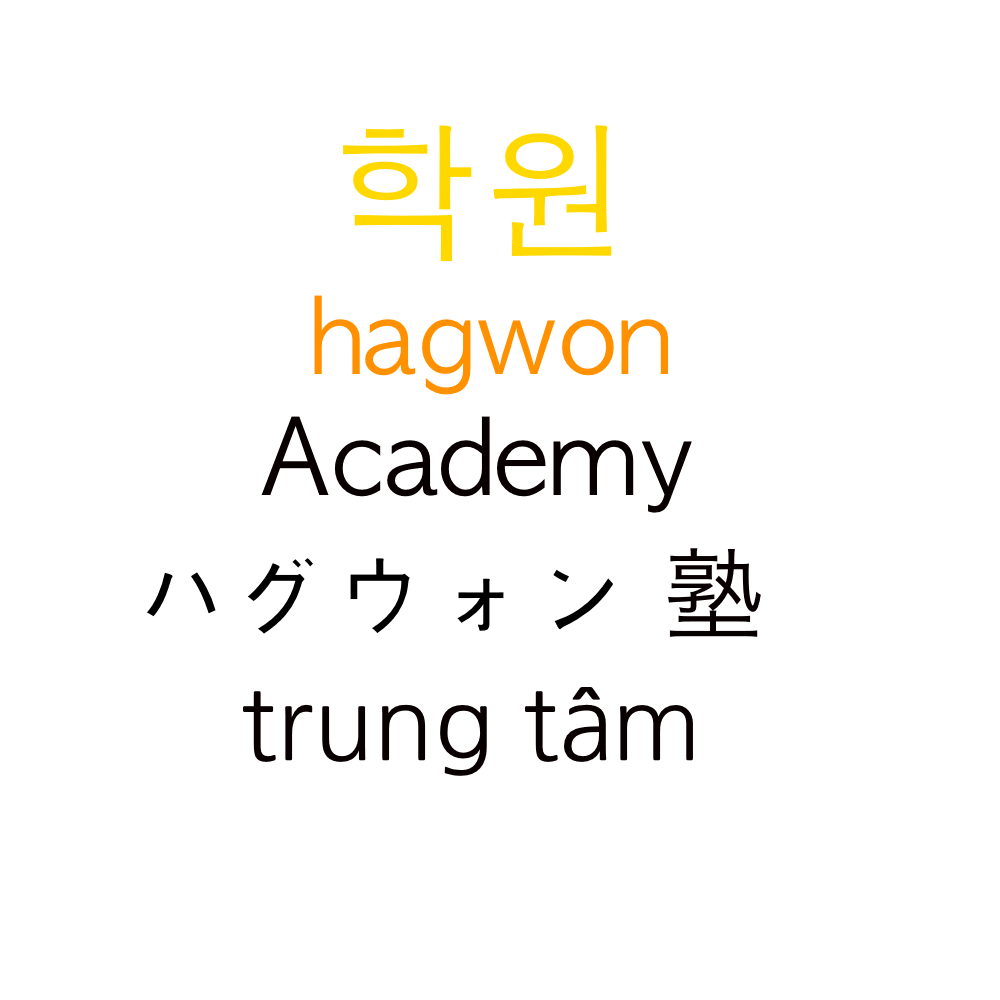
<style>
.page{position:relative;width:1000px;height:1000px;background:#ffffff}
.page>*{position:absolute;margin:0}
.t1{font:150px "AppleGothic";color:#ffd800}
.t2{font:100px "AppleGothic";color:#ff9000}
.t3{font:100px "AppleGothic";color:#080000}
.t4{font:100px "AppleGothic";color:#000000}
.t5{font:100px "HiraKakuProN-W3";color:#080000}
.t6{font:100px "NanumGothic";color:#080000}
</style>
<div class="page">
<p class="t1" style="left:343px;top:125px;width:269px;height:137px">학원</p>
<p class="t2" style="left:314px;top:295px;width:354px;height:100px">hagwon</p>
<p class="t3" style="left:261px;top:416px;width:431px;height:97px">Academy</p>
<p class="t4" style="left:147px;top:558px;width:466px;height:76px">ハグウォン</p>
<p class="t5" style="left:668px;top:548px;width:93px;height:89px">塾</p>
<p class="t6" style="left:243px;top:687px;width:450px;height:89px">trung tâm</p>
</div>
